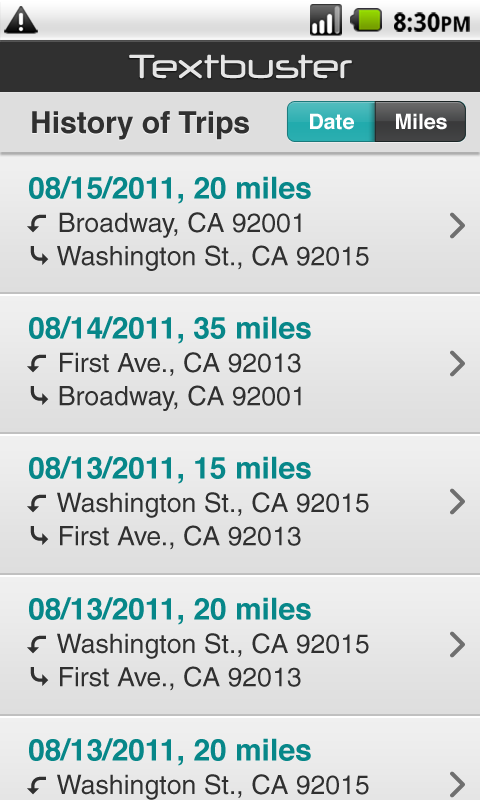
<style>
.page{position:relative;width:480px;height:800px}
.page>*{position:absolute;margin:0}
.t1{font:24px "DroidSans-Bold";letter-spacing:0.005em;color:#000000}
.t2{font:20px "DroidSans-Bold";letter-spacing:0.005em;color:#000000}
.t3{font:30px "Helvetica-Bold";color:#303030}
.t4{font:21.1px "Helvetica-Bold";color:#ffffff}
.t5{font:26.7px/33.3px "Helvetica";color:#303030}
.t6{font:30px/33.3px "Helvetica-Bold";color:#078789}
</style>
<div class="page">
<p class="t1" style="left:394px;top:12px;width:76px;height:20px">8:30<span class="t2">PM</span></p>
<p class="t3" style="left:32px;top:111px;width:217px;height:29px">History of Trips</p>
<p class="t4" style="left:310px;top:113px;width:44px;height:17px">Date</p>
<p class="t4" style="left:396px;top:113px;width:51px;height:17px">Miles</p>
<p class="t5" style="left:29px;top:176px;width:340px;height:95px"><span class="t6">08/15/2011, 20 miles<br></span>    Broadway, CA 92001<br>    Washington St., CA 92015</p>
<p class="t5" style="left:29px;top:316px;width:282px;height:95px"><span class="t6">08/14/2011, 35 miles<br></span>    First Ave., CA 92013<br>    Broadway, CA 92001</p>
<p class="t5" style="left:29px;top:456px;width:340px;height:94px"><span class="t6">08/13/2011, 15 miles<br></span>    Washington St., CA 92015<br>    First Ave., CA 92013</p>
<p class="t5" style="left:29px;top:597px;width:340px;height:94px"><span class="t6">08/13/2011, 20 miles<br></span>    Washington St., CA 92015<br>    First Ave., CA 92013</p>
</div>
